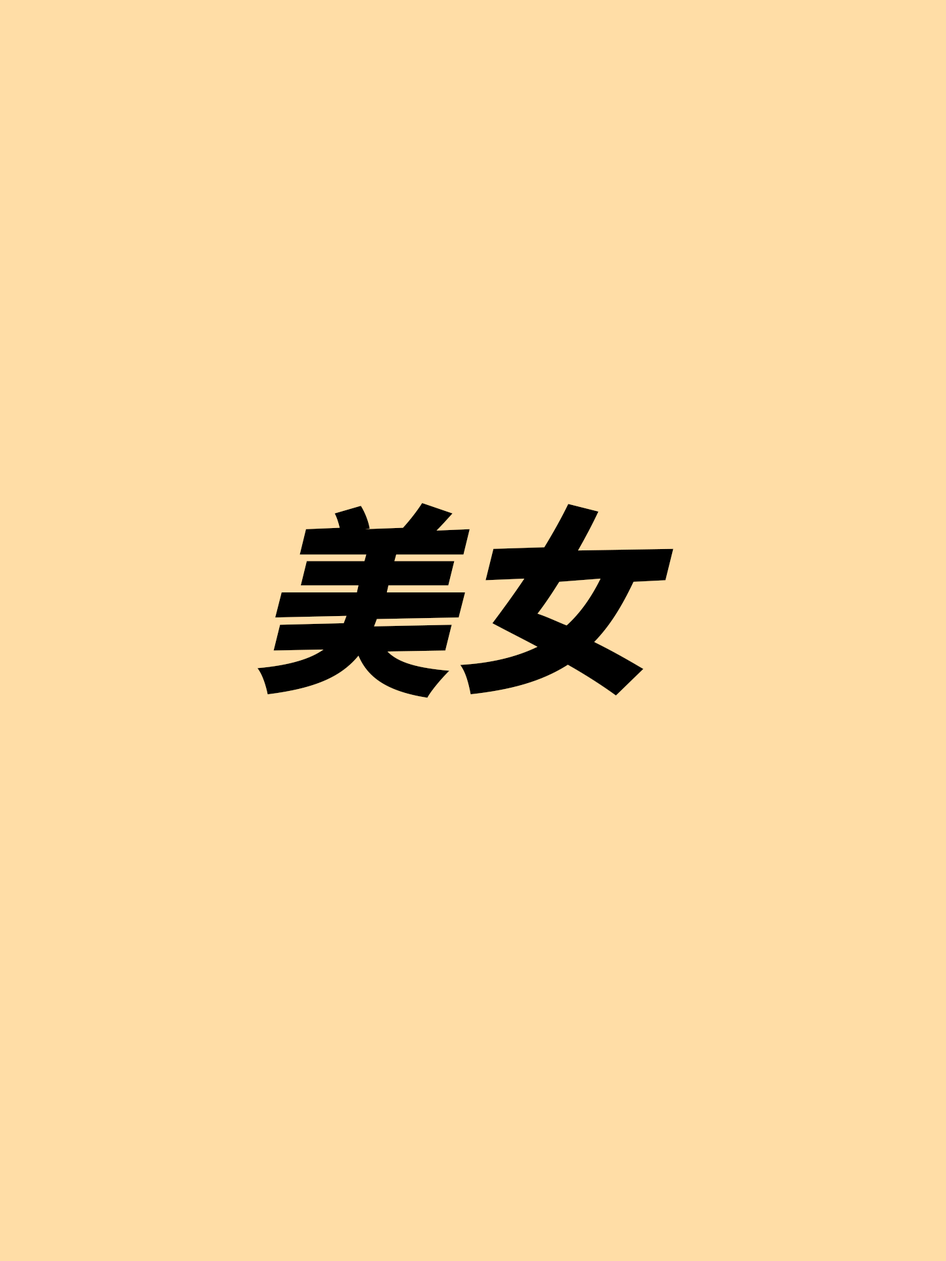
<style>
.page{position:relative;width:946px;height:1261px;background:#ffdda6}
.page>*{position:absolute;margin:0}
.t1{font:199.5px "Source-KeynoteartHans-Regular";color:#000000}
</style>
<div class="page">
<p class="t1" style="left:257px;top:502px;width:416px;height:196px">美女</p>
</div>
